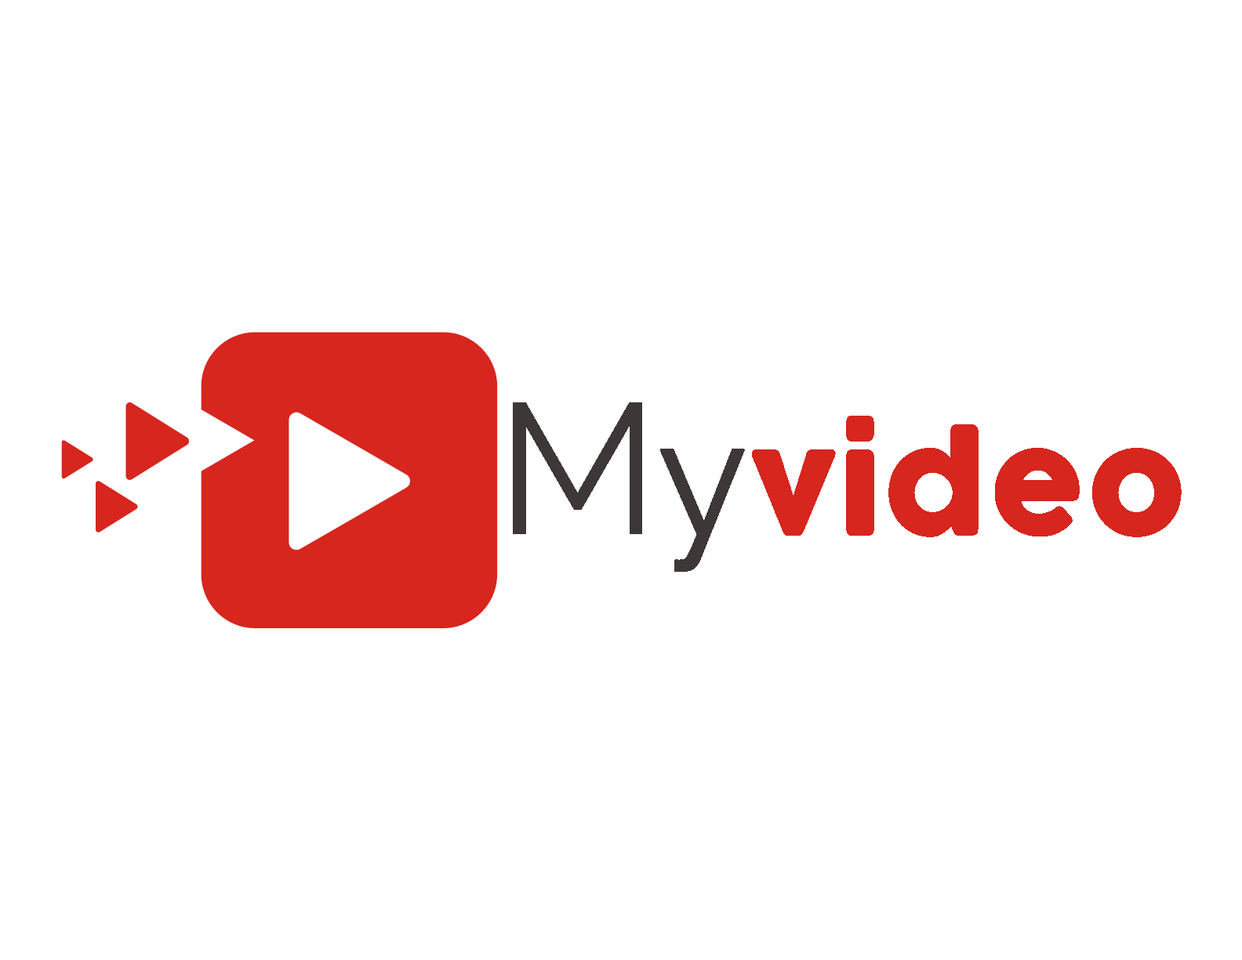
<style>
.page{position:relative;width:1242px;height:960px;background:#ffffff}
.page>*{position:absolute;margin:0}
.t1{font:132.6px "COCOGOOSE";color:#d6261e;font-weight:bold}
.t2{font:185px "Raleway";color:#3d3837}
.t3{font:162.2px "Raleway";color:#3d3837;font-weight:bold}
</style>
<div class="page">
<p class="t1" style="left:513px;top:402px;width:669px;height:170px"><span class="t2">M</span><span class="t3">y</span>video</p>
</div>
